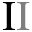
<style>
.page{position:relative;width:32px;height:32px;background:#ffffff}
.page>*{position:absolute;margin:0}
.t1{font:42px "TimesNewRomanPSMT";color:#000000}
.t2{font:42px "TimesNewRomanPSMT";color:#7e7e7e}
</style>
<div class="page">
<p class="t1" style="left:3px;top:2px;width:27px;height:28px">I<span class="t2">I</span></p>
</div>
